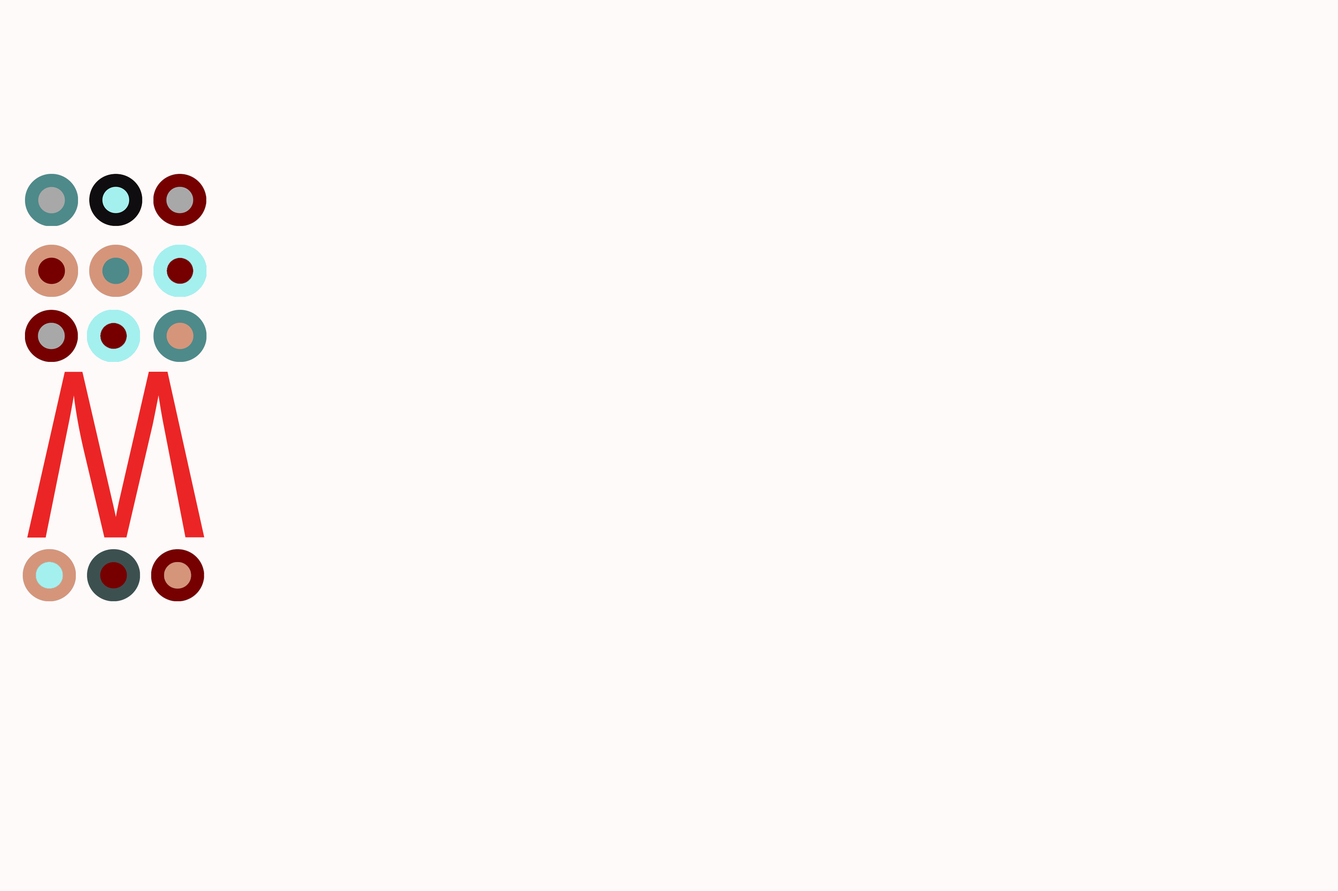
<style>
.page{position:relative;width:1338px;height:891px;background:#fffafa}
.page>*{position:absolute;margin:0}
.t1{font:231.3px "ArialMT";color:#eb2525;scale:0.83 1}
</style>
<div class="page">
<p class="t1" style="left:27px;top:372px;width:177px;height:166px;rotate:180deg">W</p>
</div>
